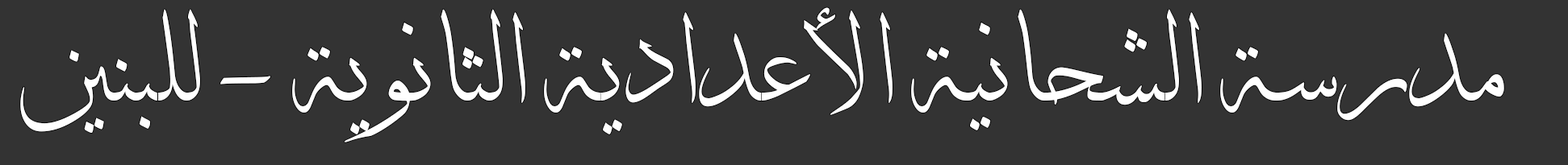
<style>
.page{position:relative;width:1568px;height:165px;background:#333333}
.page>*{position:absolute;margin:0}
.t1{font:117.1px "DecoTypeThuluth";color:#ffffff}
</style>
<div class="page">
<p class="t1" style="left:20px;top:7px;width:1484px;height:136px">مدرسة الشحانية الأعدادية الثانوية - للبنين</p>
</div>
